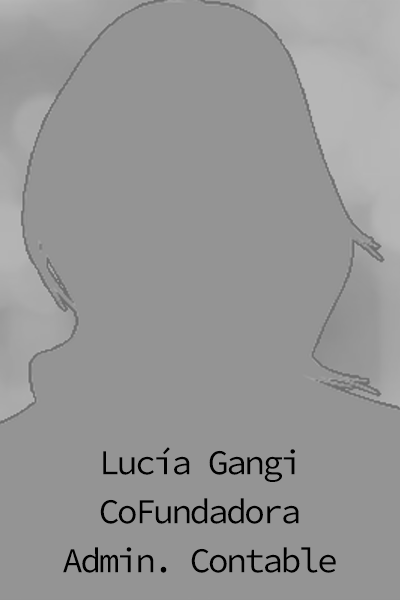
<style>
.page{position:relative;width:400px;height:600px;background:#949494}
.page>*{position:absolute;margin:0}
.t1{font:35px/49px "SourceCodePro-Regular";letter-spacing:-0.08em;color:#000000}
</style>
<div class="page">
<p class="t1" style="left:63px;top:447px;width:273px;height:126px;text-align:center">Lucía Gangi<br>CoFundadora<br>Admin. Contable</p>
</div>
